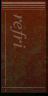
<style>
.page{position:relative;width:48px;height:96px}
.page>*{position:absolute;margin:0}
.t1{font:17.7px "TimesNewRomanPS-ItalicMT";color:#7b5a4a;scale:1.09 1}
</style>
<div class="page">
<p class="t1" style="left:10px;top:14px;width:17px;height:34px;rotate:90deg">refri</p>
</div>
